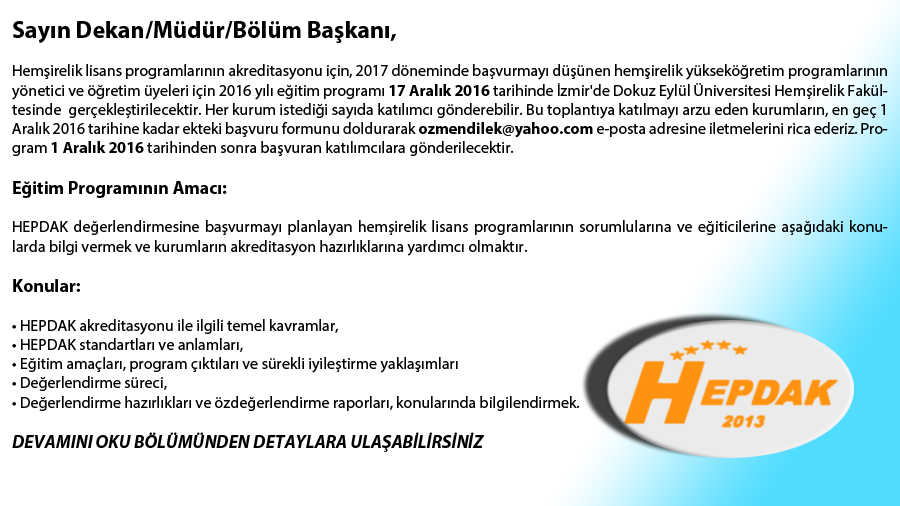
<style>
.page{position:relative;width:900px;height:506px;background:#ffffff}
.page>*{position:absolute;margin:0}
.t1{font:16px "MyriadPro-Regular";color:#000000}
.t2{font:24px "MyriadPro-Bold";color:#000000}
.t3{font:16px "MyriadPro-Bold";color:#000000}
.t4{font:18px "MyriadPro-Bold";color:#000000}
.t5{font:18px "MyriadPro-BoldIt";color:#000000}
</style>
<div class="page">
<p class="t1" style="left:12px;top:21px;width:876px;height:431px"><span class="t2">Sayın Dekan/Müdür/Bölüm Başkanı,<br></span><br>Hemşirelik lisans programlarının akreditasyonu için, 2017 döneminde başvurmayı düşünen hemşirelik yükseköğretim programlarının yönetici ve öğretim üyeleri için 2016 yılı eğitim programı <span class="t3">17 Aralık 2016 </span>tarihinde İzmir'de Dokuz Eylül Üniversitesi Hemşirelik Fakültesinde  gerçekleştirilecektir. Her kurum istediği sayıda katılımcı gönderebilir. Bu toplantıya katılmayı arzu eden kurumların, en geç 1 Aralık 2016 tarihine kadar ekteki başvuru formunu doldurarak <span class="t3">ozmendilek@yahoo.com</span> e-posta adresine iletmelerini rica ederiz. Program <span class="t3">1 Aralık 2016</span> tarihinden sonra başvuran katılımcılara gönderilecektir.<br><br><span class="t4">Eğitim Programının Amacı: <br></span><br>HEPDAK değerlendirmesine başvurmayı planlayan hemşirelik lisans programlarının sorumlularına ve eğiticilerine aşağıdaki konularda bilgi vermek ve kurumların akreditasyon hazırlıklarına yardımcı olmaktır.<br><br><span class="t4">Konular:<br></span><br>• HEPDAK akreditasyonu ile ilgili temel kavramlar,<br>• HEPDAK standartları ve anlamları,<br>• Eğitim amaçları, program çıktıları ve sürekli iyileştirme yaklaşımları<br>• Değerlendirme süreci,<br>• Değerlendirme hazırlıkları ve özdeğerlendirme raporları, konularında bilgilendirmek.<br><br><span class="t5">DEVAMINI OKU BÖLÜMÜNDEN DETAYLARA ULAŞABİLİRSİNİZ</span></p>
</div>
